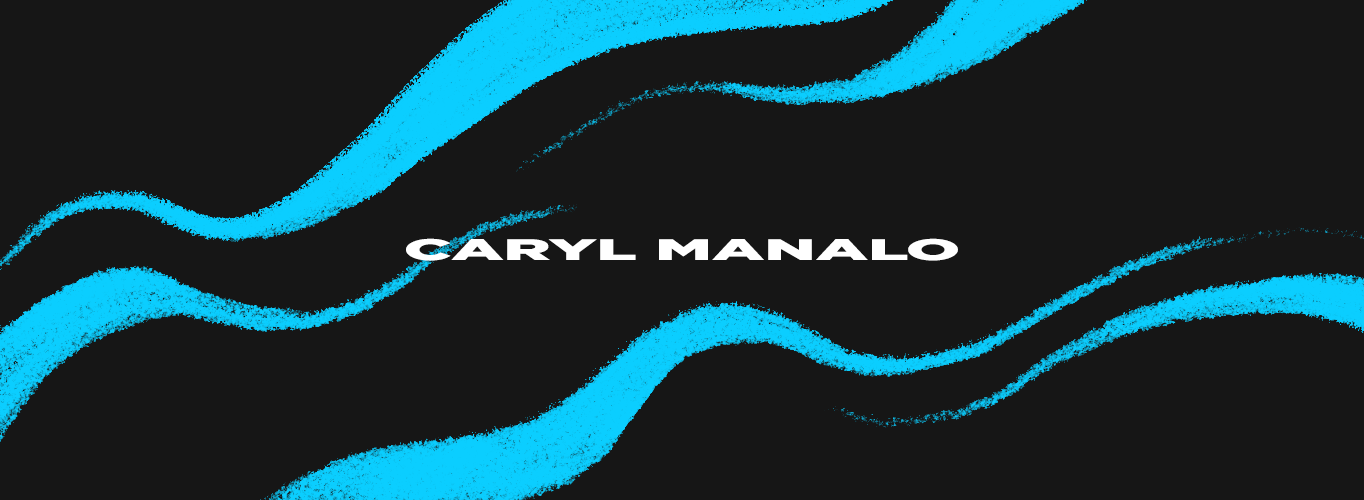
<style>
.page{position:relative;width:1364px;height:500px;background:#161616}
.page>*{position:absolute;margin:0}
.t1{font:29.5px "Gotham-Black";color:#ffffff;scale:2.22 1}
</style>
<div class="page">
<p class="t1" style="left:406px;top:238px;width:552px;height:23px">CARYL MANALO</p>
</div>
